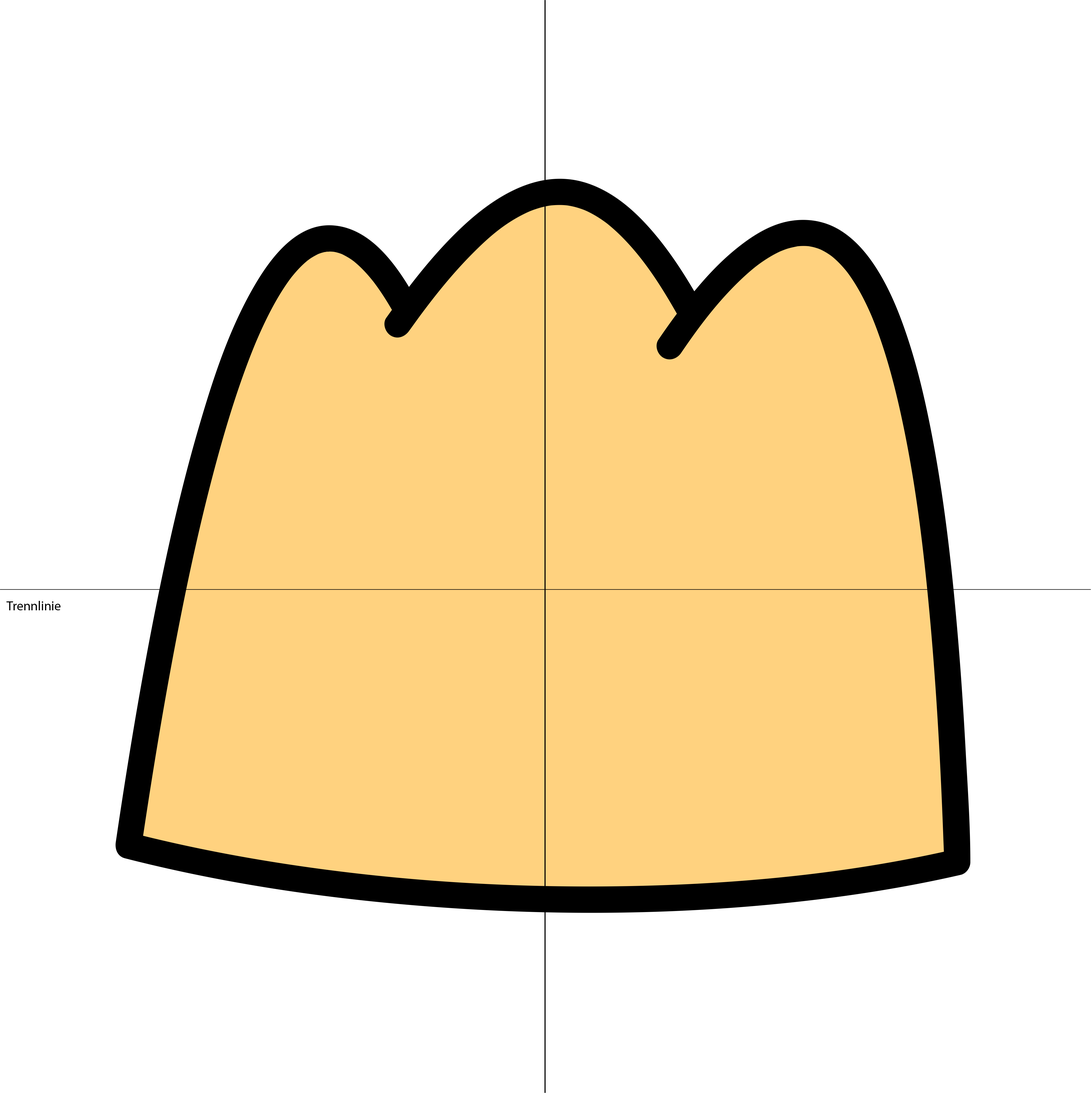
<style>
.page{position:relative;width:1091px;height:1093px;background:#ffffff}
.page>*{position:absolute;margin:0}
.t1{font:13.1px "MyriadPro-Regular";color:#000000}
</style>
<div class="page">
<p class="t1" style="left:6px;top:601px;width:55px;height:9px">Trennlinie</p>
</div>
